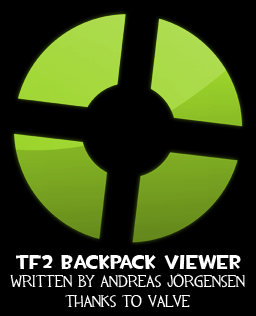
<style>
.page{position:relative;width:256px;height:316px;background:#000000}
.page>*{position:absolute;margin:0}
.t1{font:20px "TF2Build";color:#ffffff}
.t2{font:17px "TF2";color:#ffffff}
</style>
<div class="page">
<p class="t1" style="left:16px;top:255px;width:225px;height:14px">TF2 Backpack viewer</p>
<p class="t2" style="left:10px;top:273px;width:235px;height:35px;text-align:center">written by andreas jörgensen<br>Thanks to Valve</p>
</div>
